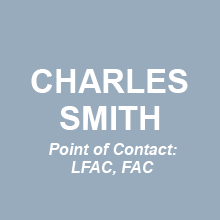
<style>
.page{position:relative;width:220px;height:220px;background:#98abbc}
.page>*{position:absolute;margin:0}
.t1{font:33px "Arial-BoldMT";color:#ffffff}
.t2{font:16px "Arial-BoldItalicMT";color:#ffffff}
</style>
<div class="page">
<p class="t1" style="left:31px;top:69px;width:157px;height:24px">CHARLES</p>
<p class="t1" style="left:60px;top:106px;width:100px;height:24px">SMITH</p>
<p class="t2" style="left:49px;top:143px;width:128px;height:12px">Point of Contact:</p>
<p class="t2" style="left:71px;top:161px;width:83px;height:14px">LFAC, FAC</p>
</div>
